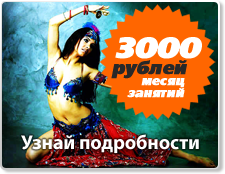
<style>
.page{position:relative;width:225px;height:174px}
.page>*{position:absolute;margin:0}
.t1{font:30px "FreeSetBlackC-Italic";letter-spacing:-0.04em;color:#ffffff;font-weight:bold}
.t2{font:18px "FreeSetBlackC-Italic";letter-spacing:-0.005em;color:#282828;font-weight:bold}
.t3{font:12px/12px "FreeSetBlackC-Italic";letter-spacing:-0.005em;color:#ffffff;font-weight:bold}
.t4{font:20px "MyriadPro-Bold";letter-spacing:-0.01em;color:#ffffff}
</style>
<div class="page">
<p class="t1" style="left:115px;top:37px;width:87px;height:22px">3000</p>
<p class="t2" style="left:111px;top:60px;width:76px;height:19px">рублей</p>
<p class="t3" style="left:127px;top:78px;width:58px;height:20px;text-align:right">месяц<br>занятий</p>
<p class="t4" style="left:21px;top:134px;width:178px;height:19px">Узнай подробности</p>
</div>
